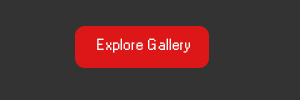
<style>
.page{position:relative;width:300px;height:100px;background:#333333}
.page>*{position:absolute;margin:0}
.t1{font:14px "MS Sans Serif";color:#ffffff}
.t2{font:14px "Verdana-Bold";color:#ffffff}
</style>
<div class="page">
<p class="t1" style="left:97px;top:38px;width:93px;height:15px"><span class="t2"> </span>Explore Gallery</p>
</div>
